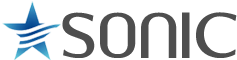
<style>
.page{position:relative;width:237px;height:60px;background:#ffffff}
.page>*{position:absolute;margin:0}
.t1{font:60px "AmerikaSans";color:#4f4f4f;text-transform:uppercase;font-weight:bold}
</style>
<div class="page">
<p class="t1" style="left:62px;top:12px;width:175px;height:46px">Sonic</p>
</div>
